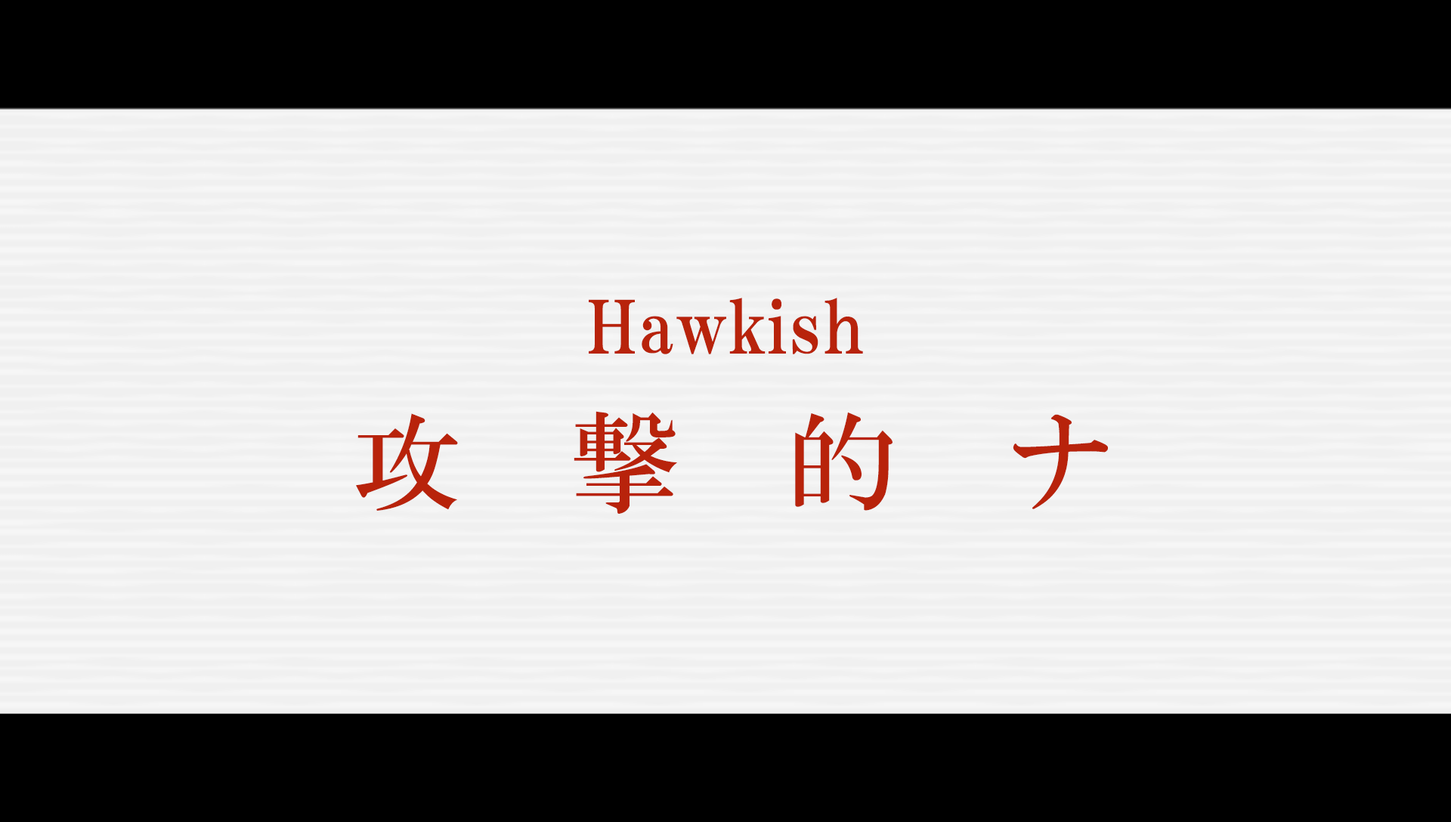
<style>
.page{position:relative;width:1451px;height:822px;background:#f0f0f0}
.page>*{position:absolute;margin:0}
.t1{font:72.5px "HGPMinchoE";letter-spacing:0.025em;color:#b8230b}
.t2{font:107.8px "HGMinchoB";letter-spacing:1.02em;color:#b8230b}
</style>
<div class="page">
<p class="t1" style="left:589px;top:298px;width:274px;height:56px">Hawkish</p>
<p class="t2" style="left:356px;top:411px;width:752px;height:103px">攻撃的ナ</p>
</div>
